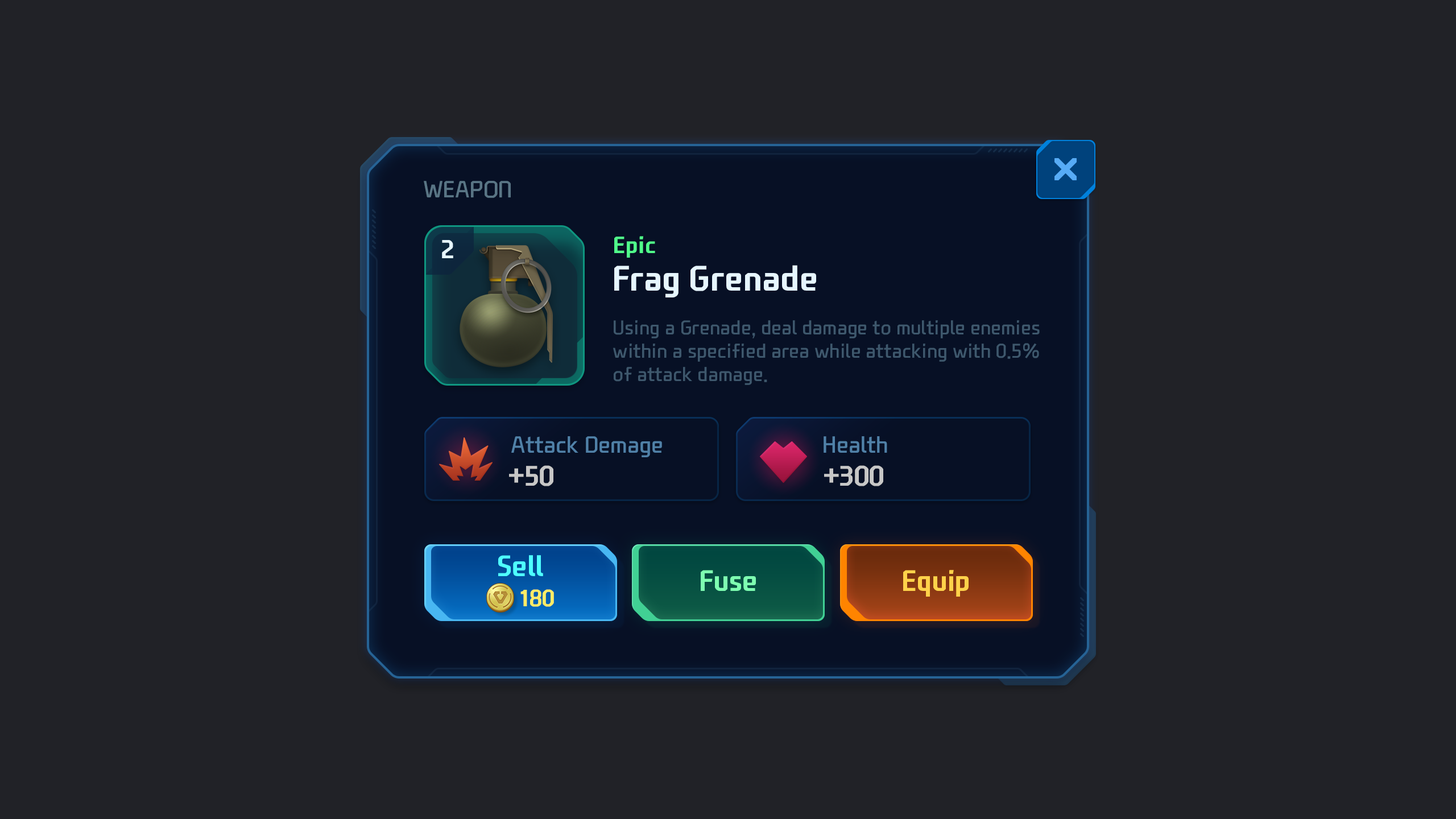
<style>
.page{position:relative;width:1456px;height:819px;background:#212227}
.page>*{position:absolute;margin:0}
.t1{font:22.7px "NEXONFootballGothicL";color:#597585;text-transform:uppercase}
.t2{font:25px "NEXONFootballGothicB";color:#e6f6ff}
.t3{font:22.7px "NEXONFootballGothicB";color:#50fc8a}
.t4{font:34.1px "NEXONFootballGothicB";color:#e6f6ff}
.t5{font:19.3px "NEXONFootballGothicL";color:#3e586d}
.t6{font:22.7px "NEXONFootballGothicL";color:#5081a8}
.t7{font:27.3px "NEXONFootballGothicB";color:#c7c7c7}
.t8{font:28.4px "NEXONFootballGothicB";color:#4efefe}
.t9{font:28.4px "NEXONFootballGothicB";color:#7effb1}
.t10{font:28.4px "NEXONFootballGothicB";color:#ffd24a}
.t11{font:22.7px "NEXONFootballGothicB";color:#ffec66;text-transform:uppercase}
</style>
<div class="page">
<p class="t1" style="left:424px;top:181px;width:87px;height:17px">Weapon</p>
<p class="t2" style="left:442px;top:240px;width:11px;height:18px">2</p>
<p class="t3" style="left:614px;top:236px;width:41px;height:22px">Epic</p>
<p class="t4" style="left:614px;top:265px;width:202px;height:32px">Frag Grenade</p>
<p class="t5" style="left:613px;top:320px;width:427px;height:65px">Using a Grenade, deal damage to multiple enemies<br>within a specified area while attacking with 0.5%<br>of attack damage.</p>
<p class="t6" style="left:511px;top:436px;width:151px;height:21px">Attack Demage</p>
<p class="t6" style="left:824px;top:436px;width:63px;height:17px">Health</p>
<p class="t7" style="left:509px;top:465px;width:44px;height:21px">+50</p>
<p class="t7" style="left:824px;top:465px;width:59px;height:21px">+300</p>
<p class="t8" style="left:498px;top:555px;width:45px;height:21px">Sell</p>
<p class="t9" style="left:701px;top:570px;width:55px;height:21px">Fuse</p>
<p class="t10" style="left:903px;top:570px;width:66px;height:27px">Equip</p>
<p class="t11" style="left:520px;top:589px;width:34px;height:18px">180</p>
</div>
